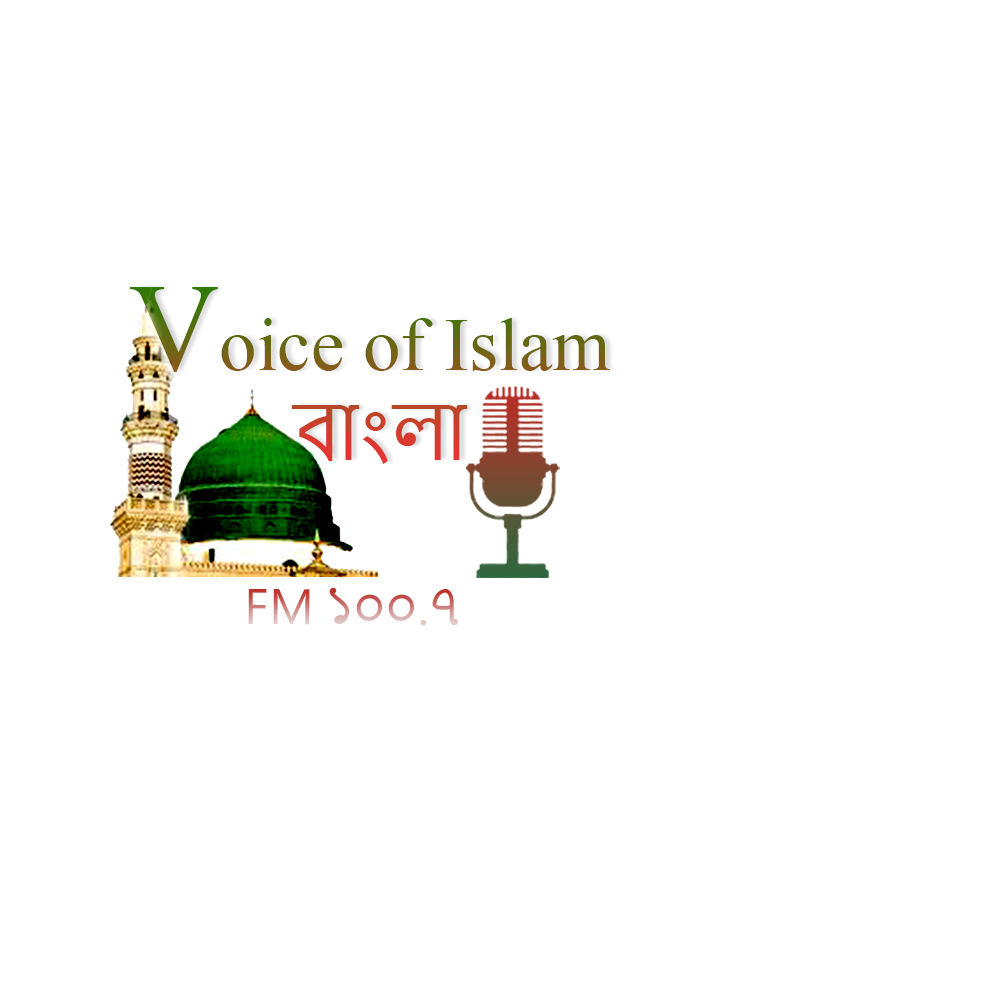
<style>
.page{position:relative;width:1000px;height:1000px;background:#ffffff}
.page>*{position:absolute;margin:0}
.t1{font:75px "TimesNewRomanPSMT"}
.t2{font:125px "TimesNewRomanPSMT"}
.t3{font:75px "NirmalaUI"}
.t4{font:50px "NirmalaUI"}
</style>
<div class="page">
<p class="t1" style="left:130px;top:287px;width:480px;height:177px"><span class="t2">V</span>oice of Islam<br><span class="t3">        বাংলা</span></p>
<p class="t4" style="left:248px;top:587px;width:210px;height:39px">FM ১০০.৭</p>
</div>
